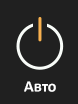
<style>
.page{position:relative;width:78px;height:104px;background:#202020}
.page>*{position:absolute;margin:0}
.t1{font:12px "Calibri-Bold";color:#ffffff}
</style>
<div class="page">
<p class="t1" style="left:24px;top:81px;width:32px;height:11px">Авто</p>
</div>
